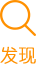
<style>
.page{position:relative;width:36px;height:64px;background:#ffffff}
.page>*{position:absolute;margin:0}
.t1{font:18px "YouYuan";color:#ff9000;text-transform:uppercase;font-weight:bold}
</style>
<div class="page">
<p class="t1" style="left:0px;top:46px;width:36px;height:18px">发现</p>
</div>
